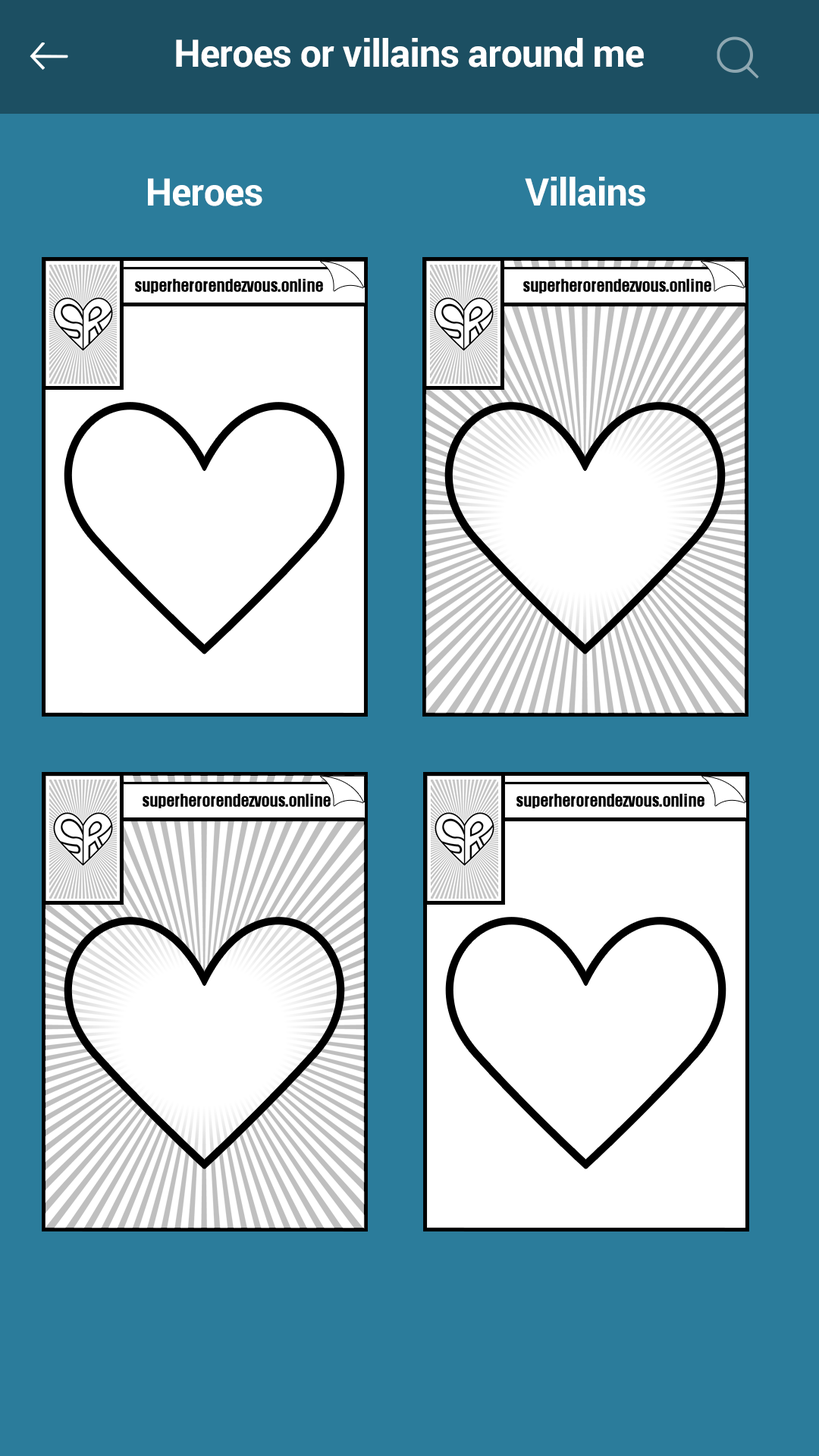
<style>
.page{position:relative;width:819px;height:1456px;background:#2b7c9b}
.page>*{position:absolute;margin:0}
.t1{font:37.9px "Roboto-Bold";letter-spacing:-0.013em;color:#ffffff}
</style>
<div class="page">
<p class="t1" style="left:176px;top:38px;width:468px;height:29px">Heroes or villains around me</p>
<p class="t1" style="left:148px;top:178px;width:114px;height:28px">Heroes</p>
<p class="t1" style="left:525px;top:177px;width:120px;height:29px">Villains</p>
</div>
